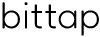
<style>
.page{position:relative;width:100px;height:37px;background:#ffffff}
.page>*{position:absolute;margin:0}
.t1{font:37.5px "Fredoka-Light";color:#000000}
</style>
<div class="page">
<p class="t1" style="left:2px;top:2px;width:97px;height:34px">bittap</p>
</div>
